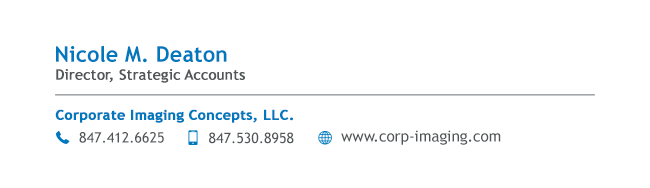
<style>
.page{position:relative;width:650px;height:188px;background:#ffffff}
.page>*{position:absolute;margin:0}
.t1{font:21.5px "TrebuchetMS-Bold";color:#0078be}
.t2{font:14.2px "TrebuchetMS";color:#525658;font-weight:bold}
.t3{font:14.1px "TrebuchetMS-Bold";color:#0078be;font-weight:bold}
.t4{font:14.3px "TrebuchetMS";color:#525658;text-transform:uppercase}
.t5{font:15.2px "TrebuchetMS";color:#525658}
</style>
<div class="page">
<p class="t1" style="left:56px;top:45px;width:171px;height:18px">Nicole M. Deaton</p>
<p class="t2" style="left:56px;top:69px;width:189px;height:14px">Director, Strategic Accounts</p>
<p class="t3" style="left:55px;top:109px;width:238px;height:14px">Corporate Imaging Concepts, LLC.</p>
<p class="t4" style="left:79px;top:132px;width:85px;height:11px">847.412.6625</p>
<p class="t4" style="left:209px;top:132px;width:85px;height:12px">847.530.8958</p>
<p class="t5" style="left:341px;top:130px;width:160px;height:15px">www.corp-imaging.com</p>
</div>
